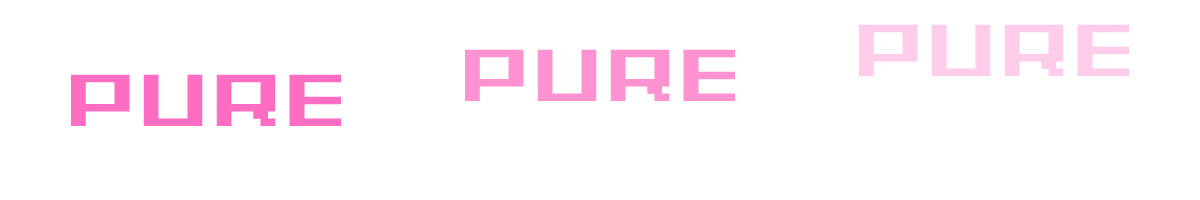
<style>
.page{position:relative;width:1200px;height:200px;background:#ffffff}
.page>*{position:absolute;margin:0}
.t1{font:58.3px "GrixelAcme7WideBoldXtnd";color:#ffccea}
.t2{font:58.3px "GrixelAcme7WideBoldXtnd";color:#ff92d1}
.t3{font:58.3px "GrixelAcme7WideBoldXtnd";color:#ff6dc2}
</style>
<div class="page">
<p class="t1" style="left:859px;top:24px;width:270px;height:52px">PURE</p>
<p class="t2" style="left:465px;top:49px;width:270px;height:52px">PURE</p>
<p class="t3" style="left:71px;top:74px;width:270px;height:52px">PURE</p>
</div>
